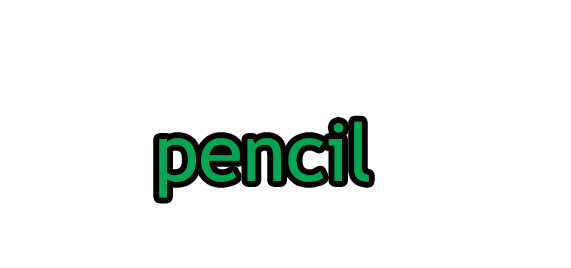
<style>
.page{position:relative;width:571px;height:268px;background:#ffffff}
.page>*{position:absolute;margin:0}
.t1{font:80px "TrebuchetMS";color:#00a651}
</style>
<div class="page">
<p class="t1" style="left:159px;top:121px;width:210px;height:77px">pencil</p>
</div>
